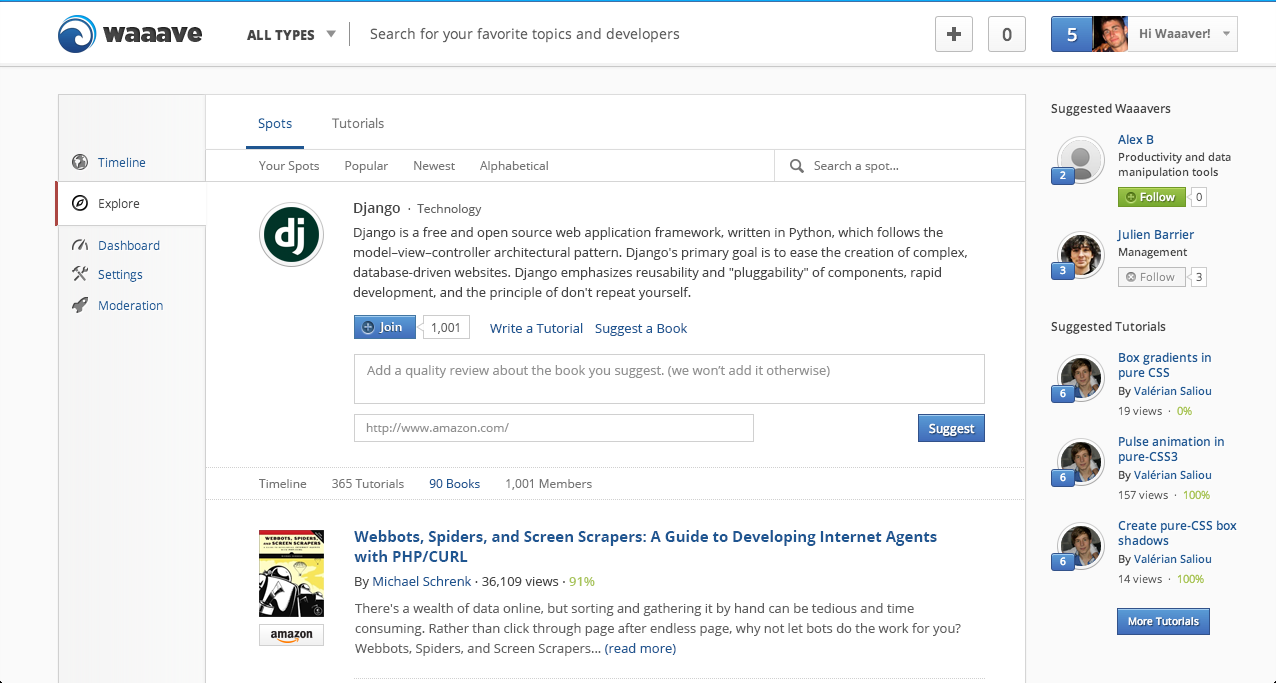
<style>
.page{position:relative;width:1276px;height:683px;background:#ffffff}
.page>*{position:absolute;margin:0}
.t1{font:12px "OpenSans";color:#757575}
.t2{font:12px "OpenSans";color:#606060}
.t3{font:14px "OpenSans-Semibold";color:#454545}
.t4{font:13px/20px "OpenSans";color:#454545}
.t5{font:12px "OpenSans-Semibold";color:#ffffff}
.t6{font:13px "OpenSans";color:#1f5691}
.t7{font:13px "OpenSans";color:#909090}
.t8{font:12px "OpenSans";color:#909090}
.t9{font:12px "OpenSans";color:#1f5691}
.t10{font:15px/20px "OpenSans-Bold";color:#1f5691}
.t11{font:13px "OpenSans";color:#454545}
.t12{font:13px "OpenSans-Semibold";color:#a9c55a}
.t13{font:13px/20px "OpenSans";color:#606060}
.t14{font:13px/20px "OpenSans";color:#1f5691}
</style>
<div class="page">
<p class="t1" style="left:259px;top:161px;width:289px;height:12px">Your Spots        Popular        Newest        Alphabetical</p>
<p class="t1" style="left:814px;top:161px;width:85px;height:12px">Search a spot...</p>
<p class="t2" style="left:354px;top:202px;width:128px;height:14px"><span class="t3">Django  </span>·  Technology</p>
<p class="t4" style="left:353px;top:227px;width:614px;height:73px">Django is a free and open source web application framework, written in Python, which follows the<br>model–view–controller architectural pattern. Django's primary goal is to ease the creation of complex,<br>database-driven websites. Django emphasizes reusability and "pluggability" of components, rapid<br>development, and the principle of don't repeat yourself.</p>
<p class="t5" style="left:379px;top:322px;width:23px;height:11px">Join</p>
<p class="t2" style="left:432px;top:323px;width:27px;height:11px">1,001</p>
<p class="t6" style="left:490px;top:323px;width:93px;height:10px">Write a Tutorial</p>
<p class="t6" style="left:595px;top:323px;width:93px;height:13px">Suggest a Book</p>
<p class="t7" style="left:367px;top:365px;width:463px;height:13px">Add a quality review about the book you suggest. (we won’t add it otherwise)</p>
<p class="t8" style="left:366px;top:423px;width:143px;height:12px">http://www.amazon.com/</p>
<p class="t1" style="left:259px;top:479px;width:333px;height:11px">Timeline        365 Tutorials        <span class="t9">90 Books</span>        1,001 Members</p>
<p class="t10" style="left:354px;top:530px;width:583px;height:32px">Webbots, Spiders, and Screen Scrapers: A Guide to Developing Internet Agents<br>with PHP/CURL</p>
<p class="t11" style="left:355px;top:576px;width:240px;height:13px">By <span class="t6">Michael Schrenk </span>· 36,109 views · <span class="t12">91%</span></p>
<p class="t13" style="left:355px;top:603px;width:606px;height:53px">There's a wealth of data online, but sorting and gathering it by hand can be tedious and time<br>consuming. Rather than click through page after endless page, why not let bots do the work for you?<br>Webbots, Spiders, and Screen Scrapers... <span class="t14">(read more)</span></p>
</div>
